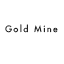
<style>
.page{position:relative;width:64px;height:64px;background:#ffffff}
.page>*{position:absolute;margin:0}
.t1{font:8.6px "FuturaLT";letter-spacing:0.2em}
</style>
<div class="page">
<p class="t1" style="left:5px;top:24px;width:53px;height:9px">Gold Mine</p>
</div>
